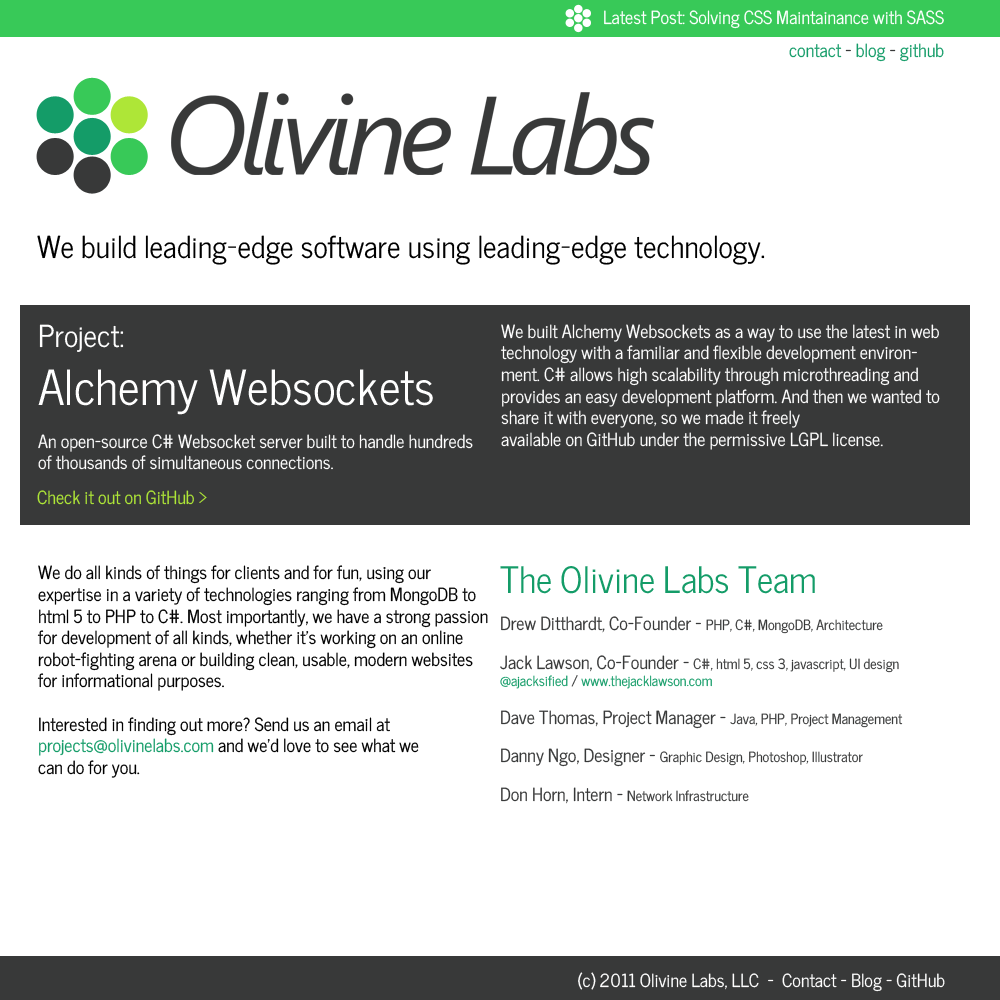
<style>
.page{position:relative;width:1000px;height:1000px;background:#ffffff}
.page>*{position:absolute;margin:0}
.t1{font:18px "NewsCycle";color:#ffffff}
.t2{font:18px "NewsCycle";color:#149c68}
.t3{font:18px "NewsCycle";color:#383939}
.t4{font:111.1px "SegoeUI-Italic";letter-spacing:-0.075em;color:#383939}
.t5{font:30px "NewsCycle";color:#000000}
.t6{font:30px "NewsCycle";color:#ffffff}
.t7{font:48px "NewsCycle";color:#ffffff}
.t8{font:18px "NewsCycle";color:#aee637}
.t9{font:18px "NewsCycle";color:#000000}
.t10{font:36px "NewsCycle";color:#149c68}
.t11{font:14px "NewsCycle";color:#383939}
.t12{font:14px "NewsCycle";color:#149c68}
</style>
<div class="page">
<p class="t1" style="left:604px;top:10px;width:340px;height:19px">Latest Post: Solving CSS Maintainance with SASS</p>
<p class="t2" style="left:789px;top:43px;width:155px;height:19px">contact <span class="t3">- </span>blog <span class="t3">- </span>github</p>
<p class="t4" style="left:171px;top:92px;width:483px;height:83px">Olivine Labs</p>
<p class="t5" style="left:37px;top:235px;width:728px;height:30px">We build leading-edge software using leading-edge technology.</p>
<p class="t1" style="left:38px;top:324px;width:435px;height:146px"><span class="t6">Project:<br></span><span class="t7">Alchemy Websockets<br></span><br>An open-source C# Websocket server built to handle hundreds <br>of thousands of simultaneous connections.</p>
<p class="t1" style="left:501px;top:324px;width:439px;height:126px">We built Alchemy Websockets as a way to use the latest in web technology with a familiar and flexible development environment. C# allows high scalability through microthreading and provides an easy development platform. And then we wanted to share it with everyone, so we made it freely <br>available on GitHub under the permissive LGPL license.</p>
<p class="t8" style="left:37px;top:490px;width:170px;height:15px">Check it out on GitHub &gt;</p>
<p class="t9" style="left:37px;top:565px;width:451px;height:213px">We do all kinds of things for clients and for fun, using our <br>expertise in a variety of technologies ranging from MongoDB to html 5 to PHP to C#. Most importantly, we have a strong passion for development of all kinds, whether it’s working on an online robot-fighting arena or building clean, usable, modern websites for informational purposes.<br><br>Interested in finding out more? Send us an email at<br><span class="t2">projects@olivinelabs.com</span> and we’d love to see what we<br>can do for you.</p>
<p class="t10" style="left:500px;top:566px;width:315px;height:28px">The Olivine Labs Team</p>
<p class="t11" style="left:500px;top:616px;width:403px;height:188px"><span class="t3">Drew Ditthardt, Co-Founder - </span>PHP, C#, MongoDB, Architecture<br><br><span class="t3">Jack Lawson, Co-Founder - </span>C#, html 5, css 3, javascript, UI design<br><span class="t12">@ajacksified</span> / <span class="t12">www.thejacklawson.com<br><br></span><span class="t3">Dave Thomas, Project Manager - </span>Java, PHP, Project Management<br><br><span class="t3">Danny Ngo, Designer - </span>Graphic Design, Photoshop, Illustrator<br><br><span class="t3">Don Horn, Intern - </span>Network Infrastructure</p>
<p class="t1" style="left:578px;top:972px;width:367px;height:20px">(c) 2011 Olivine Labs, LLC  -  Contact - Blog - GitHub</p>
</div>
